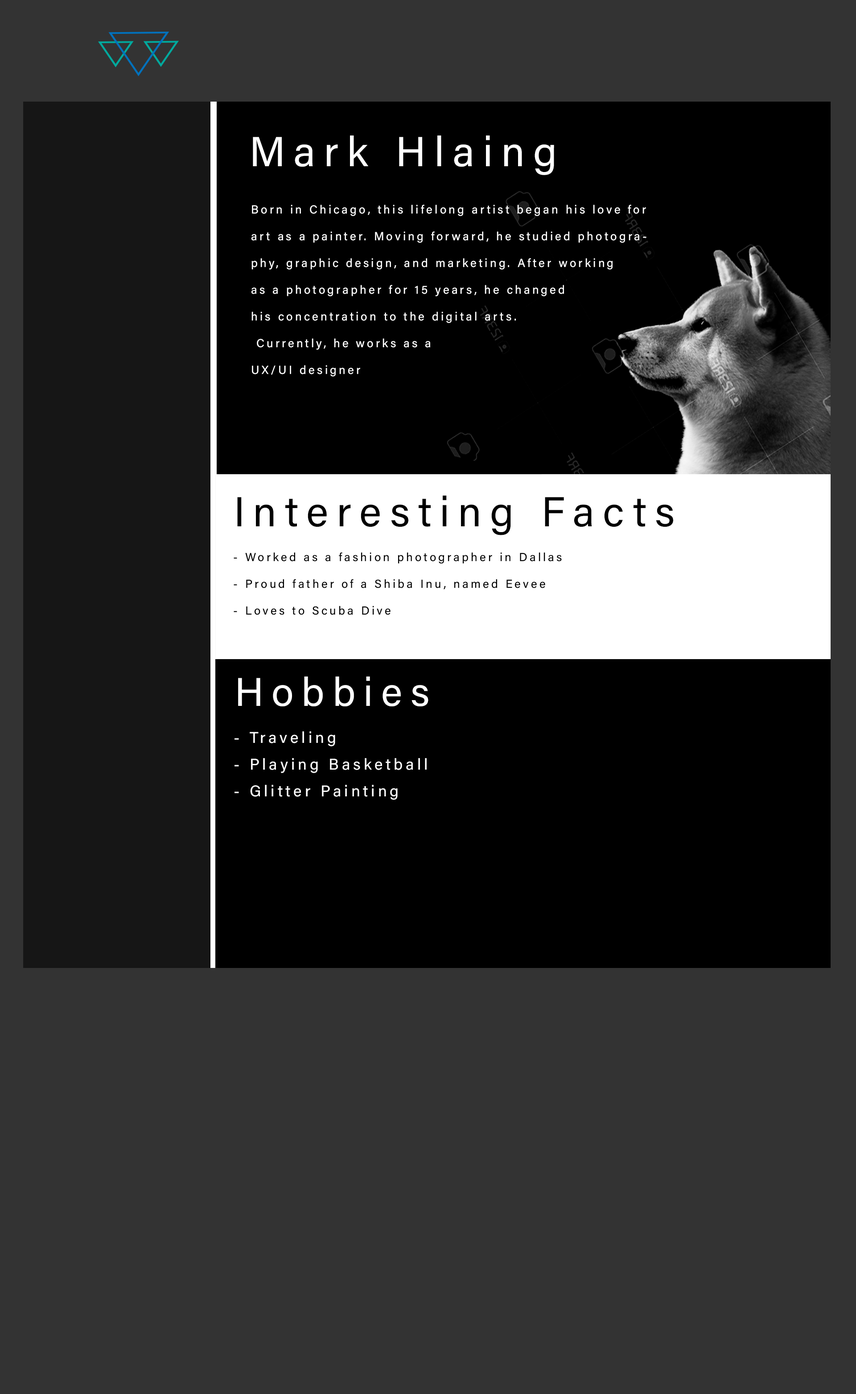
<style>
.page{position:relative;width:856px;height:1394px;background:#333333}
.page>*{position:absolute;margin:0}
.t1{font:41.9px "AcuminConcept-Regular";letter-spacing:0.2em;color:#ffffff}
.t2{font:11.6px/26.7px "AcuminConcept-Regular";letter-spacing:0.2em;color:#ffffff}
.t3{font:41.9px "AcuminConcept-Regular";letter-spacing:0.2em;color:#000000}
.t4{font:11.6px/26.7px "AcuminConcept-Regular";letter-spacing:0.2em;color:#000000}
.t5{font:40.1px "AcuminConcept-Regular";letter-spacing:0.2em;color:#ffffff}
.t6{font:15.6px/26.7px "AcuminConcept-Regular";letter-spacing:0.2em;color:#ffffff}
</style>
<div class="page">
<p class="t1" style="left:253px;top:135px;width:301px;height:40px">Mark Hlaing</p>
<p class="t2" style="left:251px;top:205px;width:395px;height:172px">Born in Chicago, this lifelong artist began his love for art as a painter. Moving forward, he studied photography, graphic design, and marketing. After working <br>as a photographer for 15 years, he changed<br>his concentration to the digital arts.<br> Currently, he works as a <br>UX/UI designer</p>
<p class="t3" style="left:237px;top:495px;width:436px;height:40px">Interesting Facts</p>
<p class="t4" style="left:233px;top:552px;width:328px;height:63px">- Worked as a fashion photographer in Dallas<br>- Proud father of a Shiba Inu, named Eevee<br>- Loves to Scuba Dive</p>
<p class="t5" style="left:238px;top:676px;width:190px;height:30px">Hobbies</p>
<p class="t6" style="left:234px;top:731px;width:192px;height:69px">- Traveling<br>- Playing Basketball<br>- Glitter Painting</p>
</div>
